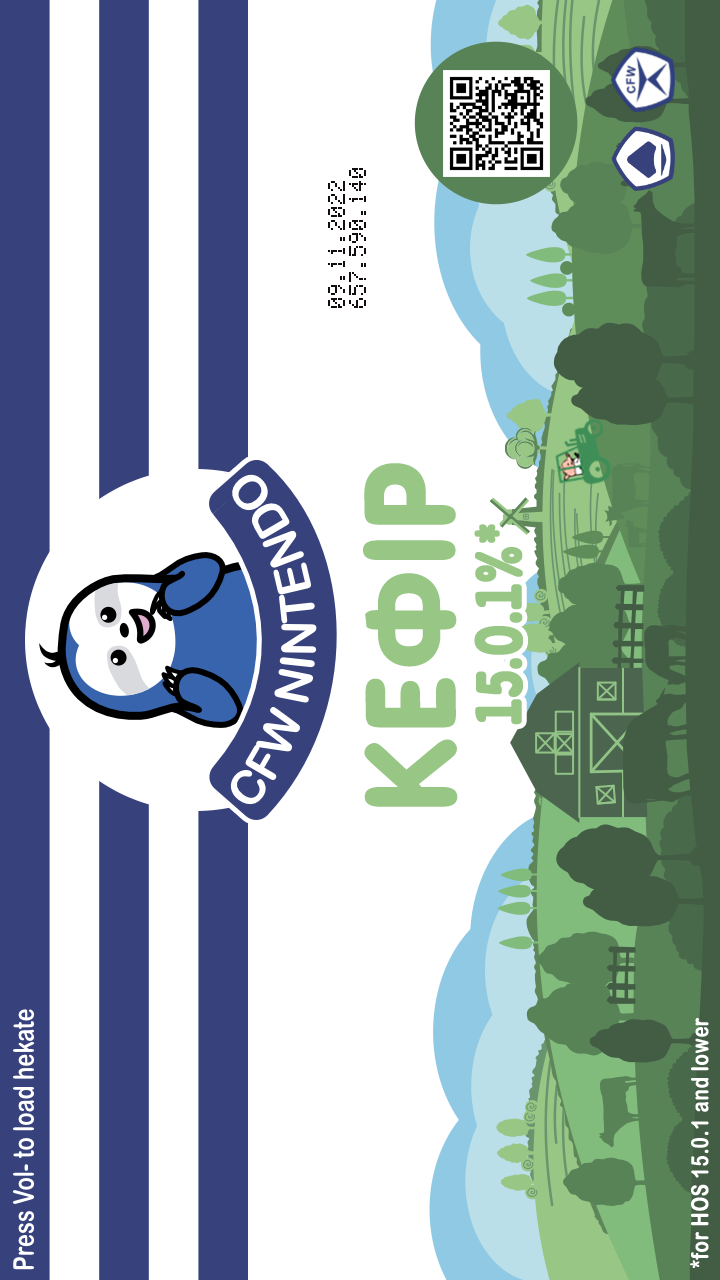
<style>
.page{position:relative;width:720px;height:1280px;background:#ffffff}
.page>*{position:absolute;margin:0}
.t1{font:23.1px "DotMatrixNormal";color:#140d0d;font-weight:bold;scale:0.77 1}
.t2{font:151.3px "aMavickFont";letter-spacing:-0.1em;color:#97c685;font-weight:bold;scale:0.93 1}
.t3{font:75.9px "aMavickFont";letter-spacing:-0.1em;color:#97c685;font-weight:bold;scale:0.77 1}
.t4{font:23.4px "ArialRoundedMTBold";color:#ffffff;font-weight:bold;scale:0.77 1}
</style>
<div class="page">
<p class="t1" style="left:328px;top:168px;width:38px;height:140px;rotate:-90deg">09.11.2022<br>657.590.140</p>
<p class="t2" style="left:363px;top:463px;width:95px;height:344px;rotate:-90deg">КЕФIР</p>
<p class="t3" style="left:474px;top:524px;width:49px;height:201px;rotate:-90deg">15.0.1%*</p>
<p class="t4" style="left:690px;top:1018px;width:19px;height:250px;rotate:-90deg">*for HOS 15.0.1 and lower</p>
</div>
